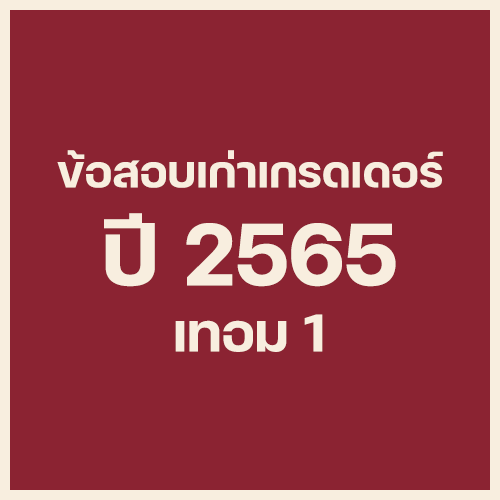
<style>
.page{position:relative;width:500px;height:500px;background:#8b2332}
.page>*{position:absolute;margin:0}
.t1{font:60px "FCMinimalBold";color:#f8eedf}
.t2{font:120px "FCMinimalBold";color:#f8eedf}
.t3{font:72px "FCMinimalBold";color:#f8eedf}
</style>
<div class="page">
<p class="t1" style="left:57px;top:150px;width:386px;height:38px">ข้อสอบเก่าเกรดเดอร์</p>
<p class="t2" style="left:104px;top:213px;width:292px;height:74px">ปี 2565</p>
<p class="t3" style="left:175px;top:314px;width:148px;height:38px">เทอม 1</p>
</div>
